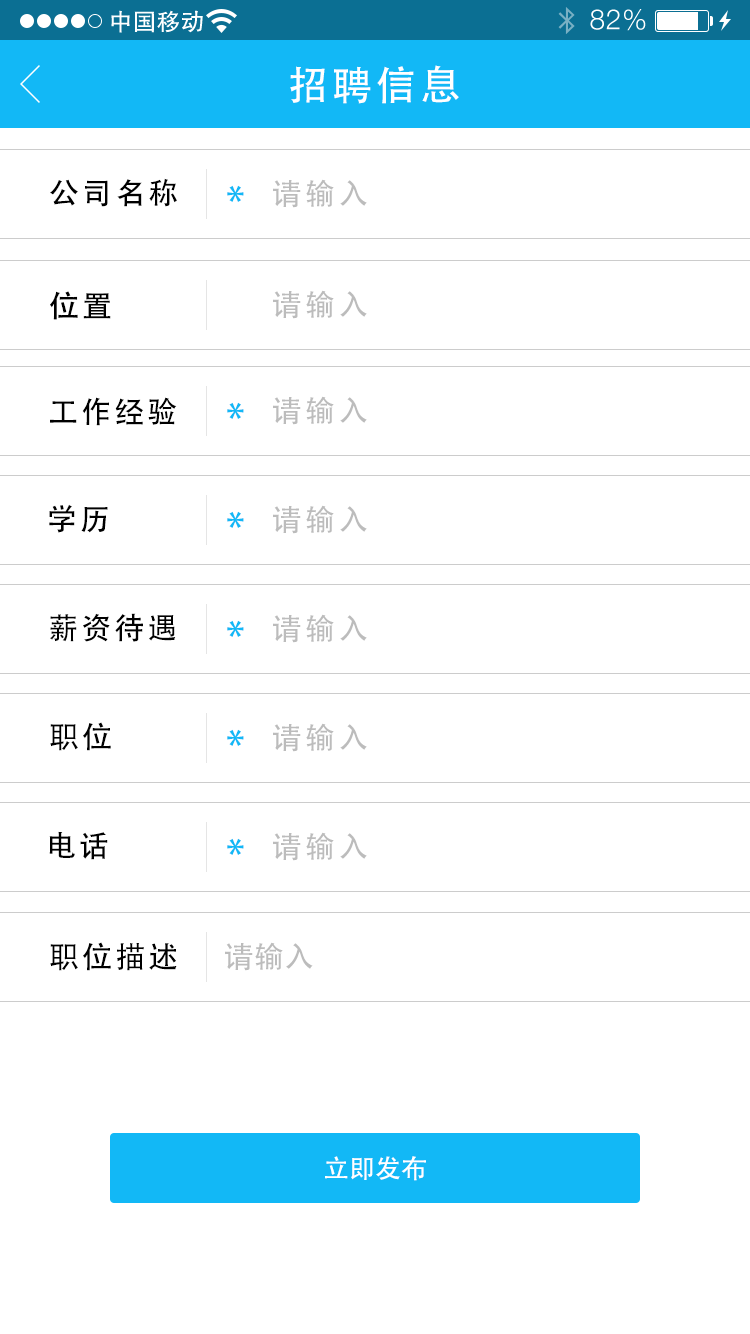
<style>
.page{position:relative;width:750px;height:1334px;background:#ffffff}
.page>*{position:absolute;margin:0}
.t1{font:40px "AdobeHeitiStd-Regular";letter-spacing:0.104em;color:#ffffff}
.t2{font:30px "AdobeHeitiStd-Regular";letter-spacing:0.104em;color:#000000}
.t3{font:40px "AdobeHeitiStd-Regular";letter-spacing:0.104em;color:#12b8f6}
.t4{font:30px "AdobeHeitiStd-Regular";letter-spacing:0.104em;color:#bcbcbc}
.t5{font:30px "AdobeHeitiStd-Regular";letter-spacing:0.104em;color:#010101}
.t6{font:30px "AdobeHeitiStd-Regular";color:#bcbcbc}
.t7{font:26px "AdobeHeitiStd-Regular";color:#ffffff}
</style>
<div class="page">
<p class="t1" style="left:290px;top:65px;width:169px;height:39px">招聘信息</p>
<p class="t2" style="left:50px;top:178px;width:127px;height:29px">公司名称</p>
<p class="t3" style="left:227px;top:185px;width:17px;height:17px">*</p>
<p class="t4" style="left:273px;top:179px;width:94px;height:29px">请输入</p>
<p class="t2" style="left:50px;top:291px;width:61px;height:29px">位置</p>
<p class="t4" style="left:273px;top:290px;width:94px;height:29px">请输入</p>
<p class="t2" style="left:50px;top:397px;width:127px;height:29px">工作经验</p>
<p class="t4" style="left:273px;top:396px;width:94px;height:29px">请输入</p>
<p class="t3" style="left:227px;top:402px;width:17px;height:17px">*</p>
<p class="t2" style="left:49px;top:504px;width:59px;height:29px">学历</p>
<p class="t4" style="left:273px;top:505px;width:94px;height:29px">请输入</p>
<p class="t3" style="left:227px;top:511px;width:17px;height:17px">*</p>
<p class="t2" style="left:50px;top:613px;width:126px;height:29px">薪资待遇</p>
<p class="t4" style="left:273px;top:614px;width:94px;height:29px">请输入</p>
<p class="t3" style="left:227px;top:620px;width:17px;height:17px">*</p>
<p class="t5" style="left:50px;top:722px;width:61px;height:29px">职位</p>
<p class="t4" style="left:273px;top:723px;width:94px;height:29px">请输入</p>
<p class="t3" style="left:227px;top:729px;width:17px;height:17px">*</p>
<p class="t2" style="left:49px;top:831px;width:59px;height:29px">电话</p>
<p class="t4" style="left:273px;top:832px;width:94px;height:29px">请输入</p>
<p class="t3" style="left:227px;top:838px;width:17px;height:17px">*</p>
<p class="t2" style="left:50px;top:942px;width:127px;height:29px">职位描述</p>
<p class="t6" style="left:225px;top:942px;width:88px;height:29px">请输入</p>
<p class="t7" style="left:325px;top:1156px;width:101px;height:25px">立即发布</p>
</div>
